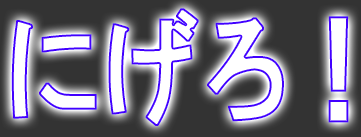
<style>
.page{position:relative;width:361px;height:137px;background:#333333}
.page>*{position:absolute;margin:0}
.t1{font:121.2px "HGSGothicE";letter-spacing:-0.07em;color:#ffffff;font-weight:bold;scale:0.82 1}
</style>
<div class="page">
<p class="t1" style="left:11px;top:8px;width:338px;height:118px">にげろ！</p>
</div>
